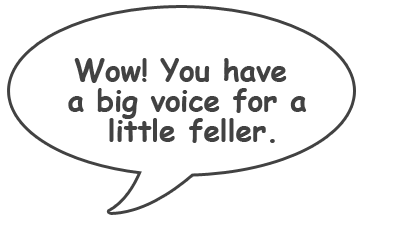
<style>
.page{position:relative;width:397px;height:230px;background:#ffffff}
.page>*{position:absolute;margin:0}
.t1{font:30px/30px "ComicSansMS-Bold";letter-spacing:-0.01em;color:#424242}
</style>
<div class="page">
<p class="t1" style="left:68px;top:58px;width:239px;height:85px;text-align:center">Wow! You have <br>a big voice for a<br> little feller.</p>
</div>
